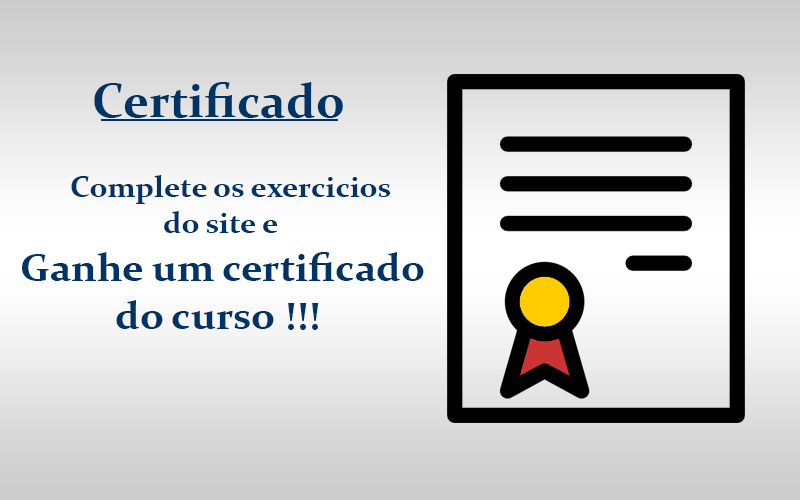
<style>
.page{position:relative;width:800px;height:500px}
.page>*{position:absolute;margin:0}
.t1{font:40px "Constantia-Bold";color:#003366}
.t2{font:36px "Constantia";color:#003366}
.t3{font:48px "Constantia-Bold";color:#003366}
.t4{font:30px "Constantia-Bold";color:#003366}
</style>
<div class="page">
<p class="t1" style="left:22px;top:82px;width:402px;height:248px"><span class="t2">  </span><span class="t3">Certificado<br>  <br></span><span class="t4">       Complete os exercicios <br>                    do site e<br></span>Ganhe um certificado                            do curso !!!</p>
</div>
